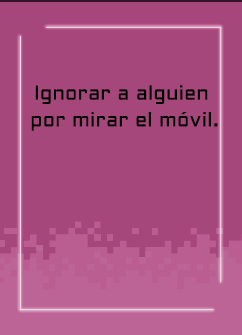
<style>
.page{position:relative;width:242px;height:335px;background:#a5477b}
.page>*{position:absolute;margin:0}
.t1{font:20px/26.7px "Aldrich-Regular";letter-spacing:0.015em;color:#000000}
</style>
<div class="page">
<p class="t1" style="left:31px;top:85px;width:187px;height:46px;text-align:center">Ignorar a alguien <br>por mirar el móvil.</p>
</div>
